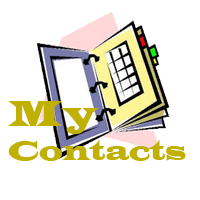
<style>
.page{position:relative;width:200px;height:200px;background:#ffffff}
.page>*{position:absolute;margin:0}
.t1{font:28.8px "LatinWide";color:#c0b002;scale:0.84 1}
.t2{font:38.5px "LatinWide";color:#c0b002;scale:0.84 1}
</style>
<div class="page">
<p class="t1" style="left:8px;top:101px;width:178px;height:60px"><span class="t2">My<br></span>Contacts</p>
</div>
